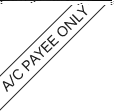
<style>
.page{position:relative;width:114px;height:112px;background:#ffffff}
.page>*{position:absolute;margin:0}
.t1{font:14px "Kalinga";color:#202020}
</style>
<div class="page">
<p class="t1" style="left:2px;top:4px;width:86px;height:88px;rotate:-44deg">A/C PAYEE ONLY</p>
</div>
